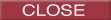
<style>
.page{position:relative;width:111px;height:20px}
.page>*{position:absolute;margin:0}
.t1{font:15.7px "Helvetica";color:#ffffff;scale:1.2 1}
</style>
<div class="page">
<p class="t1" style="left:22px;top:4px;width:63px;height:12px">CLOSE</p>
</div>
